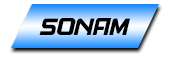
<style>
.page{position:relative;width:170px;height:60px;background:#ffffff}
.page>*{position:absolute;margin:0}
.t1{font:25px "Spantaran";color:#000000}
</style>
<div class="page">
<p class="t1" style="left:39px;top:18px;width:91px;height:17px">SONAM</p>
</div>
